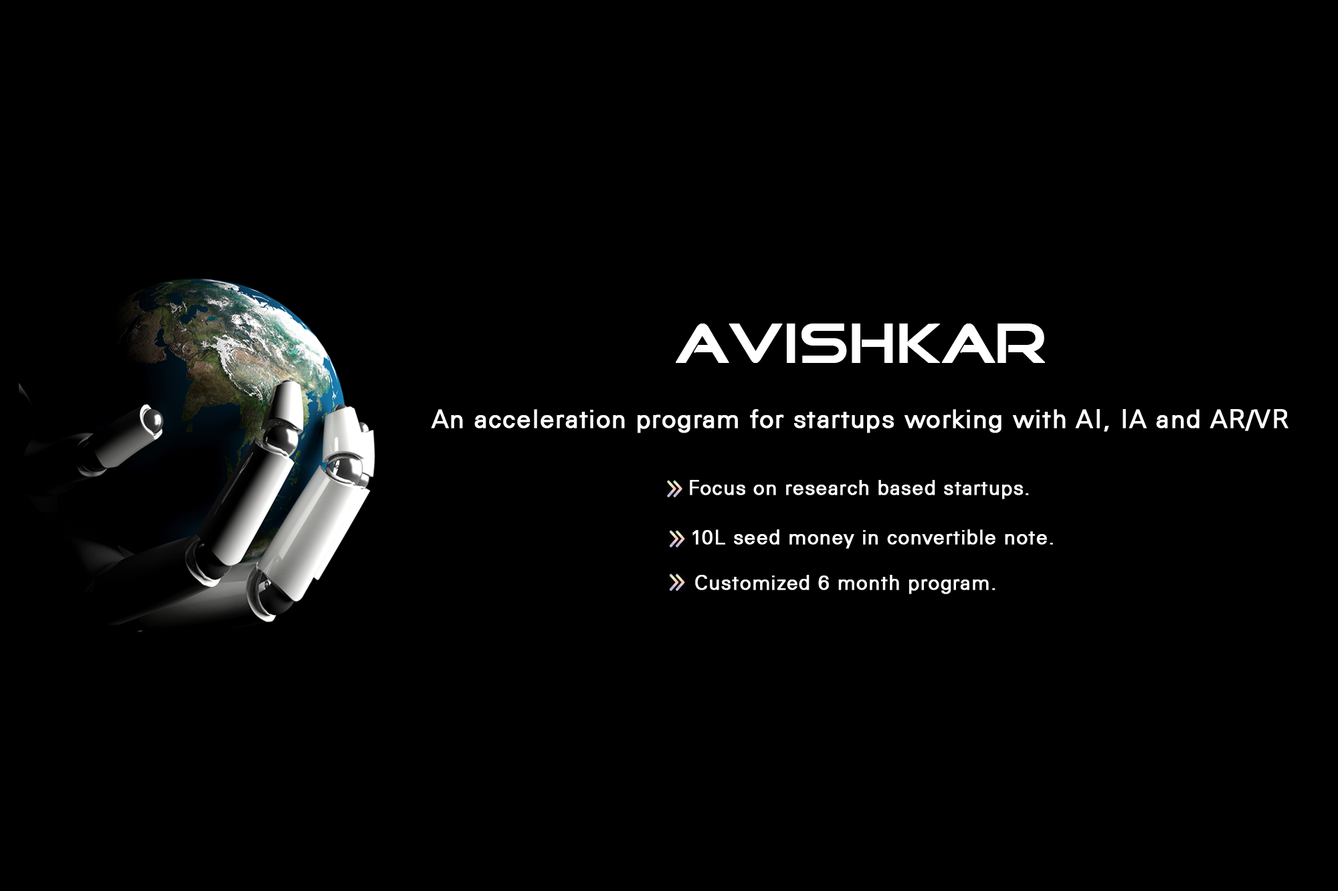
<style>
.page{position:relative;width:1338px;height:891px;background:#000000}
.page>*{position:absolute;margin:0}
.t1{font:53.5px "GoodTimes";color:#ffffff;font-weight:bold}
.t2{font:25.4px "GenW-Regular";color:#ffffff;font-weight:bold}
.t3{font:20.1px "GenW-Regular";color:#ffffff;font-weight:bold}
</style>
<div class="page">
<p class="t1" style="left:675px;top:324px;width:370px;height:39px">AVISHKAR</p>
<p class="t2" style="left:431px;top:409px;width:857px;height:24px">An acceleration program for startups working with AI, IA and AR/VR</p>
<p class="t3" style="left:690px;top:480px;width:339px;height:20px">Focus on research based startups.</p>
<p class="t3" style="left:692px;top:530px;width:361px;height:19px">10L seed money in convertible note.</p>
<p class="t3" style="left:695px;top:575px;width:300px;height:20px">Customized 6 month program.</p>
</div>
